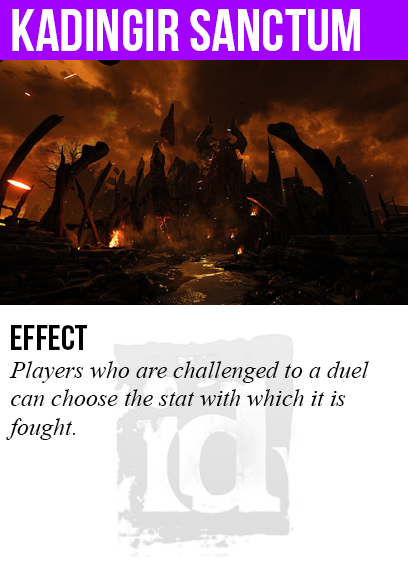
<style>
.page{position:relative;width:408px;height:585px;background:#ffffff}
.page>*{position:absolute;margin:0}
.t1{font:60px "BebasNeue";color:#ffffff}
.t2{font:36px "BebasNeue";color:#000000}
.t3{font:24px "TimesNewRomanPS-ItalicMT";color:#000000}
</style>
<div class="page">
<p class="t1" style="left:12px;top:9px;width:348px;height:42px">Kadingir Sanctum</p>
<p class="t2" style="left:11px;top:325px;width:76px;height:25px">Effect</p>
<p class="t3" style="left:6px;top:361px;width:363px;height:79px">Players who are challenged to a duel<br>can choose the stat with which it is<br>fought.</p>
</div>
